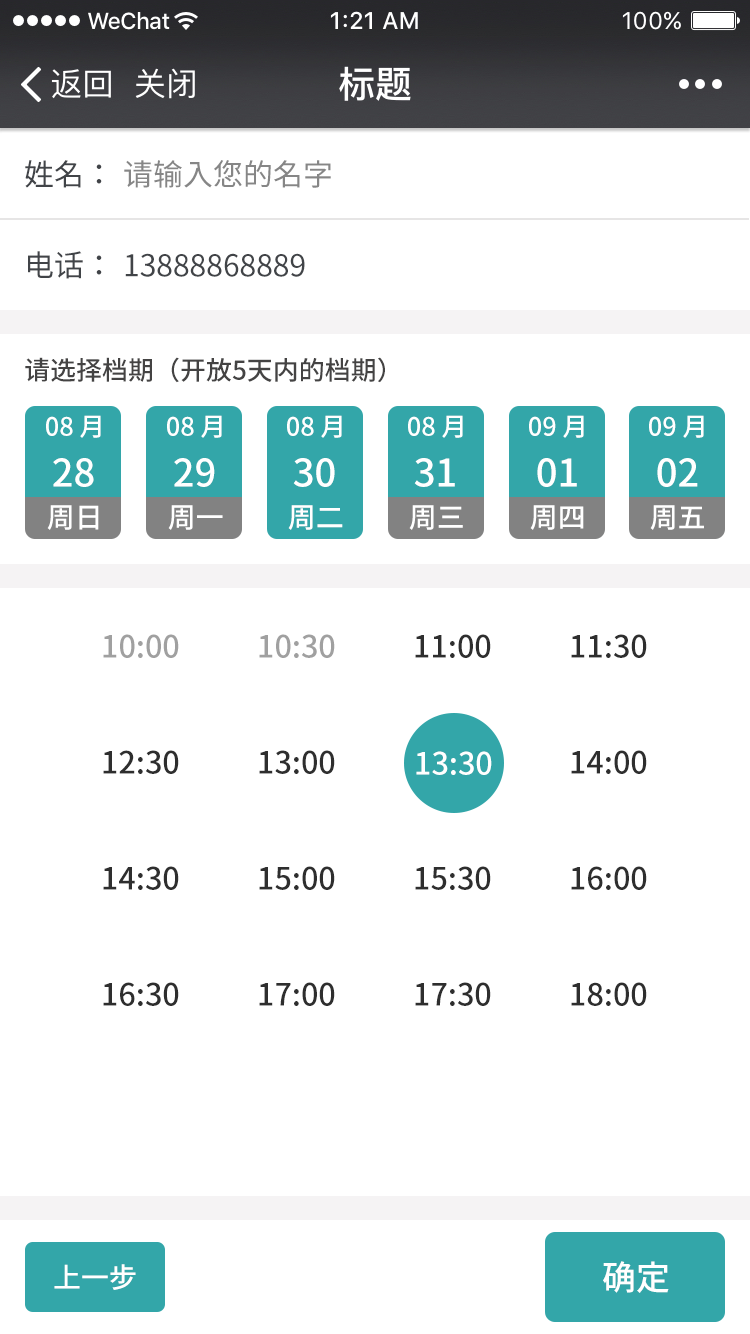
<style>
.page{position:relative;width:750px;height:1334px;background:#ffffff}
.page>*{position:absolute;margin:0}
.t1{font:30px "NotoSansCJK-Regular";color:#414448}
.t2{font:30px "NotoSansCJK-Regular";color:#868686}
.t3{font:26px "NotoSansCJK-Medium";color:#444343}
.t4{font:25.5px "NotoSansCJK-Medium";color:#ffffff}
.t5{font:38.2px "NotoSansCJK-Medium";color:#ffffff}
.t6{font:28px "NotoSansCJK-Medium";color:#ffffff}
.t7{font:30.5px "NotoSansCJK-Medium";color:#a0a0a0}
.t8{font:30.5px "NotoSansCJK-Medium";color:#2e2e2e}
.t9{font:30.5px "NotoSansCJK-Medium";color:#ffffff}
.t10{font:34px "NotoSansCJK-Medium";color:#ffffff}
</style>
<div class="page">
<p class="t1" style="left:25px;top:160px;width:77px;height:28px">姓名：</p>
<p class="t2" style="left:124px;top:160px;width:207px;height:28px">请输入您的名字</p>
<p class="t1" style="left:28px;top:251px;width:74px;height:28px">电话：</p>
<p class="t1" style="left:125px;top:253px;width:180px;height:24px">13888868889</p>
<p class="t3" style="left:25px;top:357px;width:360px;height:26px">请选择档期（开放5天内的档期）</p>
<p class="t4" style="left:46px;top:415px;width:55px;height:23px">08 月</p>
<p class="t4" style="left:167px;top:415px;width:55px;height:23px">08 月</p>
<p class="t4" style="left:287px;top:415px;width:55px;height:23px">08 月</p>
<p class="t4" style="left:408px;top:415px;width:55px;height:23px">08 月</p>
<p class="t4" style="left:529px;top:415px;width:55px;height:23px">09 月</p>
<p class="t4" style="left:649px;top:415px;width:55px;height:23px">09 月</p>
<p class="t5" style="left:53px;top:458px;width:41px;height:29px">28</p>
<p class="t5" style="left:174px;top:458px;width:41px;height:29px">29</p>
<p class="t5" style="left:293px;top:458px;width:42px;height:29px">30</p>
<p class="t5" style="left:414px;top:458px;width:41px;height:29px">31</p>
<p class="t5" style="left:537px;top:458px;width:40px;height:29px">01</p>
<p class="t5" style="left:657px;top:458px;width:41px;height:29px">02</p>
<p class="t6" style="left:47px;top:505px;width:52px;height:25px">周日</p>
<p class="t6" style="left:168px;top:505px;width:55px;height:25px">周一</p>
<p class="t6" style="left:288px;top:505px;width:55px;height:25px">周二</p>
<p class="t6" style="left:409px;top:505px;width:54px;height:25px">周三</p>
<p class="t6" style="left:530px;top:505px;width:54px;height:25px">周四</p>
<p class="t6" style="left:650px;top:505px;width:54px;height:25px">周五</p>
<p class="t7" style="left:103px;top:634px;width:76px;height:24px">10:00</p>
<p class="t7" style="left:259px;top:634px;width:76px;height:24px">10:30</p>
<p class="t8" style="left:415px;top:634px;width:76px;height:24px">11:00</p>
<p class="t8" style="left:571px;top:634px;width:76px;height:24px">11:30</p>
<p class="t8" style="left:103px;top:750px;width:76px;height:24px">12:30</p>
<p class="t8" style="left:259px;top:750px;width:76px;height:24px">13:00</p>
<p class="t8" style="left:571px;top:750px;width:76px;height:24px">14:00</p>
<p class="t9" style="left:416px;top:751px;width:76px;height:24px">13:30</p>
<p class="t8" style="left:103px;top:866px;width:76px;height:24px">14:30</p>
<p class="t8" style="left:259px;top:866px;width:76px;height:24px">15:00</p>
<p class="t8" style="left:415px;top:866px;width:76px;height:24px">15:30</p>
<p class="t8" style="left:571px;top:866px;width:76px;height:24px">16:00</p>
<p class="t8" style="left:103px;top:982px;width:76px;height:24px">16:30</p>
<p class="t8" style="left:259px;top:982px;width:76px;height:24px">17:00</p>
<p class="t8" style="left:415px;top:982px;width:76px;height:24px">17:30</p>
<p class="t8" style="left:571px;top:982px;width:76px;height:24px">18:00</p>
<p class="t6" style="left:54px;top:1264px;width:82px;height:26px">上一步</p>
<p class="t10" style="left:603px;top:1261px;width:66px;height:32px">确定</p>
</div>
